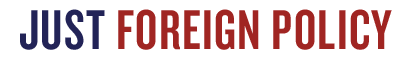
<style>
.page{position:relative;width:410px;height:60px;background:#ffffff}
.page>*{position:absolute;margin:0}
.t1{font:58.3px "Knockout-HTF48-Featherweight";letter-spacing:0.025em;color:#a02522}
.t2{font:58.3px "Knockout-HTF48-Featherweight";letter-spacing:0.025em;color:#222357}
</style>
<div class="page">
<p class="t1" style="left:20px;top:9px;width:372px;height:41px"><span class="t2">JUST</span> FOREIGN POLICY</p>
</div>
